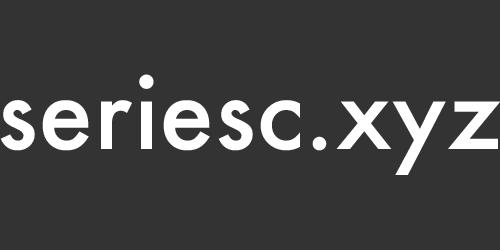
<style>
.page{position:relative;width:500px;height:250px;background:#333333}
.page>*{position:absolute;margin:0}
.t1{font:100px "Futura-Medium";letter-spacing:0.005em;color:#ffffff}
</style>
<div class="page">
<p class="t1" style="left:0px;top:74px;width:501px;height:101px">seriesc.xyz</p>
</div>
